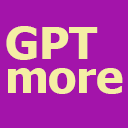
<style>
.page{position:relative;width:128px;height:128px;background:#a314aa}
.page>*{position:absolute;margin:0}
.t1{font:43.6px/34px "Tahoma-Bold";color:#f4eea4;scale:1.05 1}
</style>
<div class="page">
<p class="t1" style="left:6px;top:26px;width:117px;height:68px">GPT<br>more</p>
</div>
